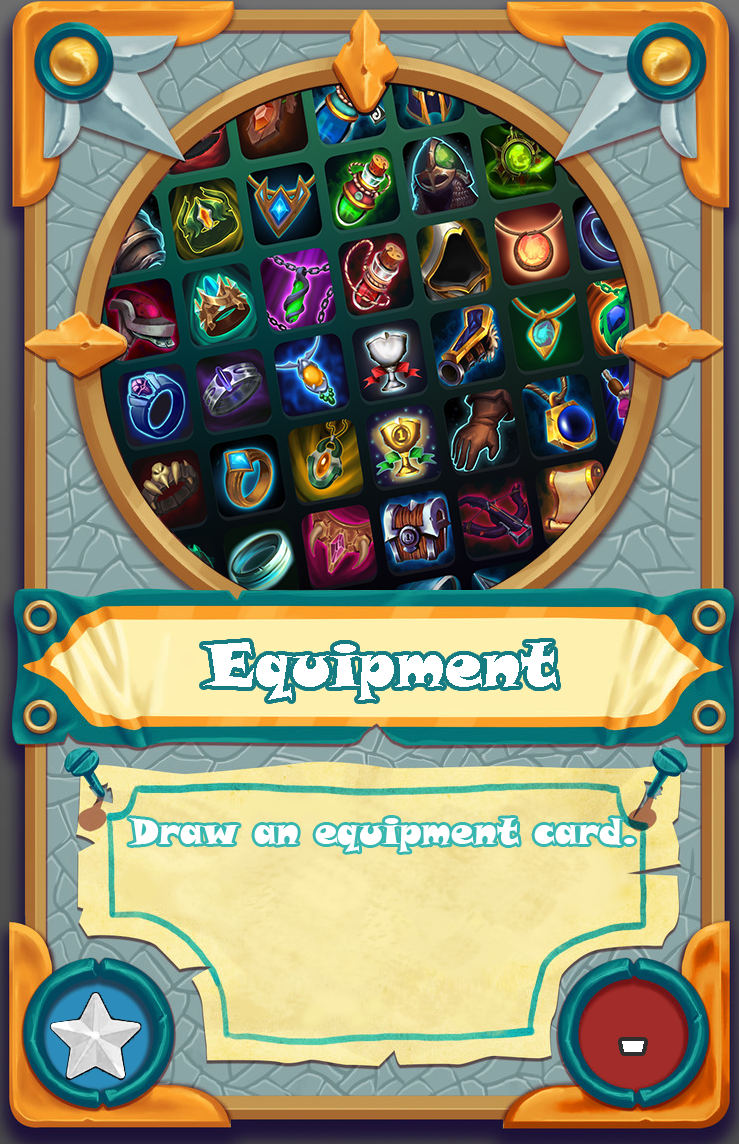
<style>
.page{position:relative;width:739px;height:1144px}
.page>*{position:absolute;margin:0}
.t1{font:60px "SnapITC-Regular";color:#ffffff}
.t2{font:36px "SnapITC-Regular";color:#ffffff}
.t3{font:72px "ShowcardGothic-Reg";color:#ffffff}
</style>
<div class="page">
<p class="t1" style="left:203px;top:642px;width:354px;height:58px">Equipment</p>
<p class="t2" style="left:129px;top:818px;width:506px;height:34px">Draw an equipment card.</p>
<p class="t3" style="left:622px;top:1041px;width:22px;height:11px">-</p>
</div>
